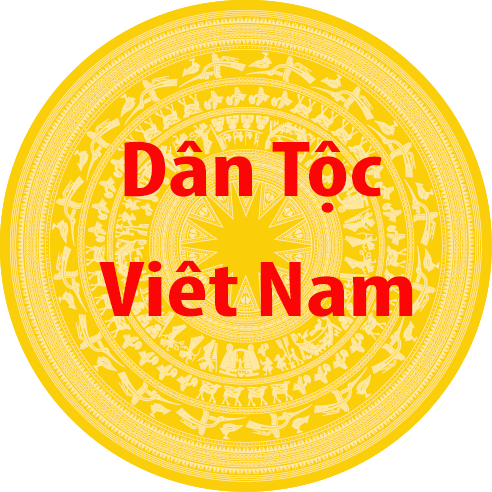
<style>
.page{position:relative;width:492px;height:492px;background:#fbce0a}
.page>*{position:absolute;margin:0}
.t1{font:80px "MyriadPro-BoldCond";color:#fb0606;scale:1.25 1}
</style>
<div class="page">
<p class="t1" style="left:99px;top:140px;width:314px;height:177px;text-align:center">Dân Tộc <br>Viêt Nam</p>
</div>
